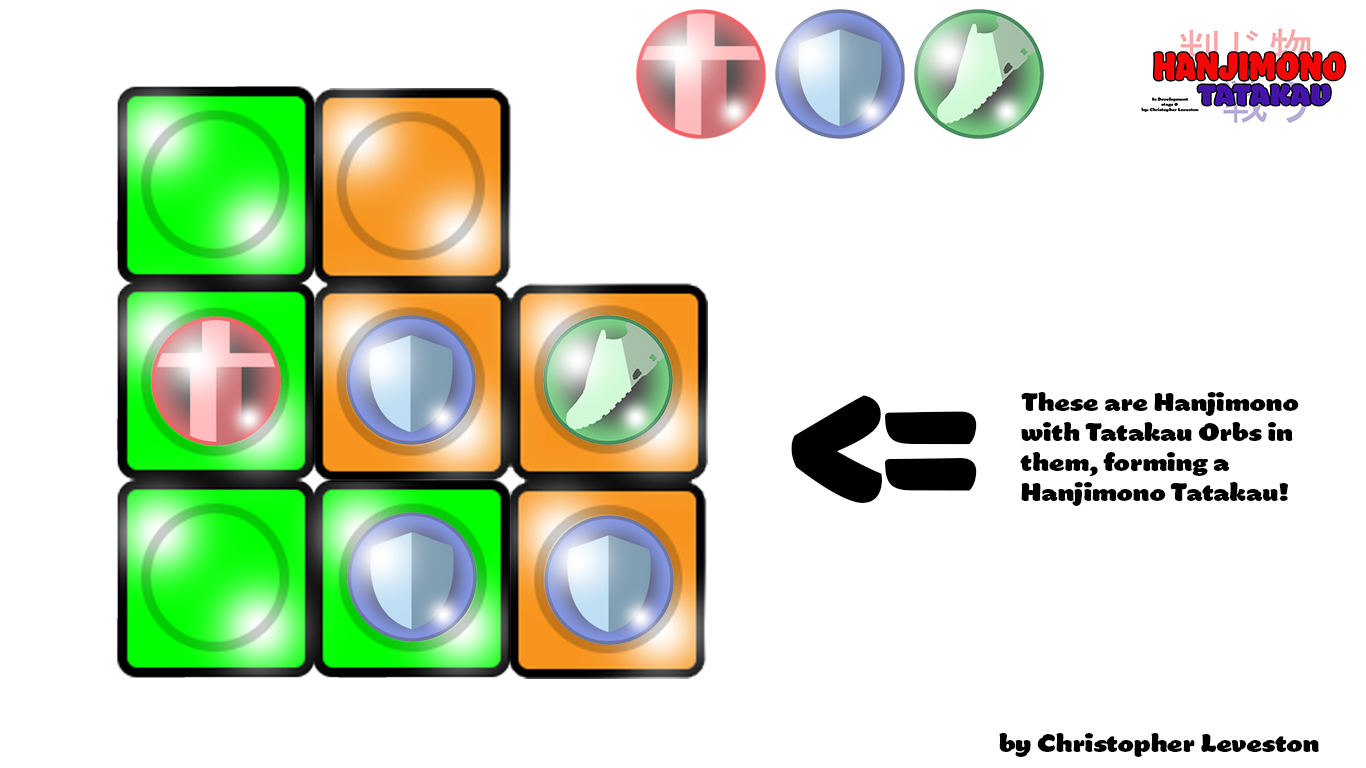
<style>
.page{position:relative;width:1366px;height:768px;background:#ffffff}
.page>*{position:absolute;margin:0}
.t1{font:82.2px "Manteiga-Gorda";color:#000000}
.t2{font:12px "Manteiga-Gorda";color:#000000}
</style>
<div class="page">
<p class="t1" style="left:791px;top:395px;width:186px;height:108px">&lt;=</p>
<p class="t2" style="left:1020px;top:392px;width:279px;height:114px">These are Hanjimono<br>with Tatakau Orbs in <br>them, forming a <br>Hanjimono Tatakau!</p>
<p class="t2" style="left:999px;top:733px;width:320px;height:24px">by Christopher Leveston</p>
</div>
